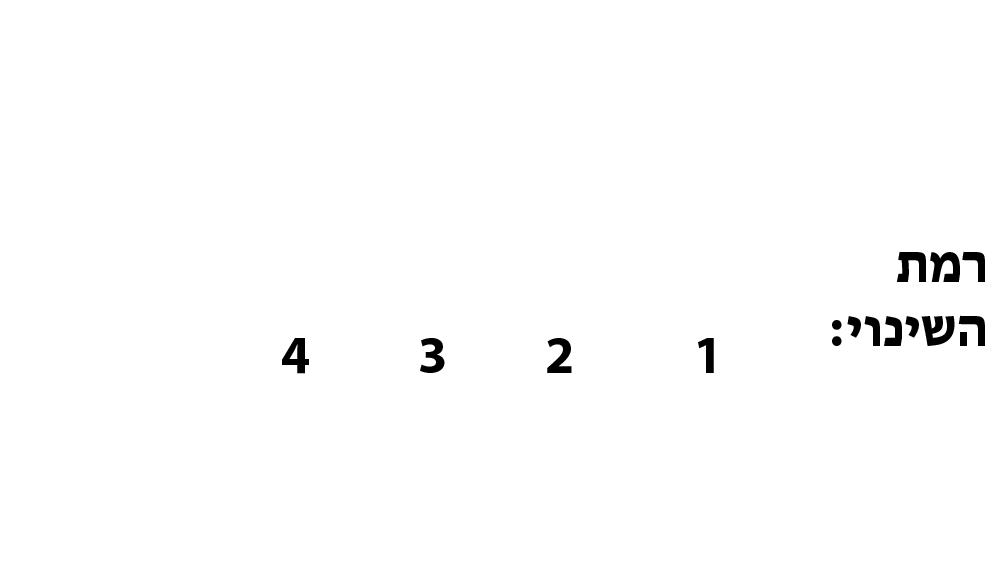
<style>
.page{position:relative;width:1000px;height:563px;background:#ffffff}
.page>*{position:absolute;margin:0}
.t1{font:53.3px "MyriadHebrew-Bold";color:#000000}
</style>
<div class="page">
<p class="t1" style="left:832px;top:251px;width:153px;height:95px">רמת <br>השינוי:</p>
<p class="t1" style="left:282px;top:338px;width:432px;height:36px">1           2         3          4</p>
</div>
